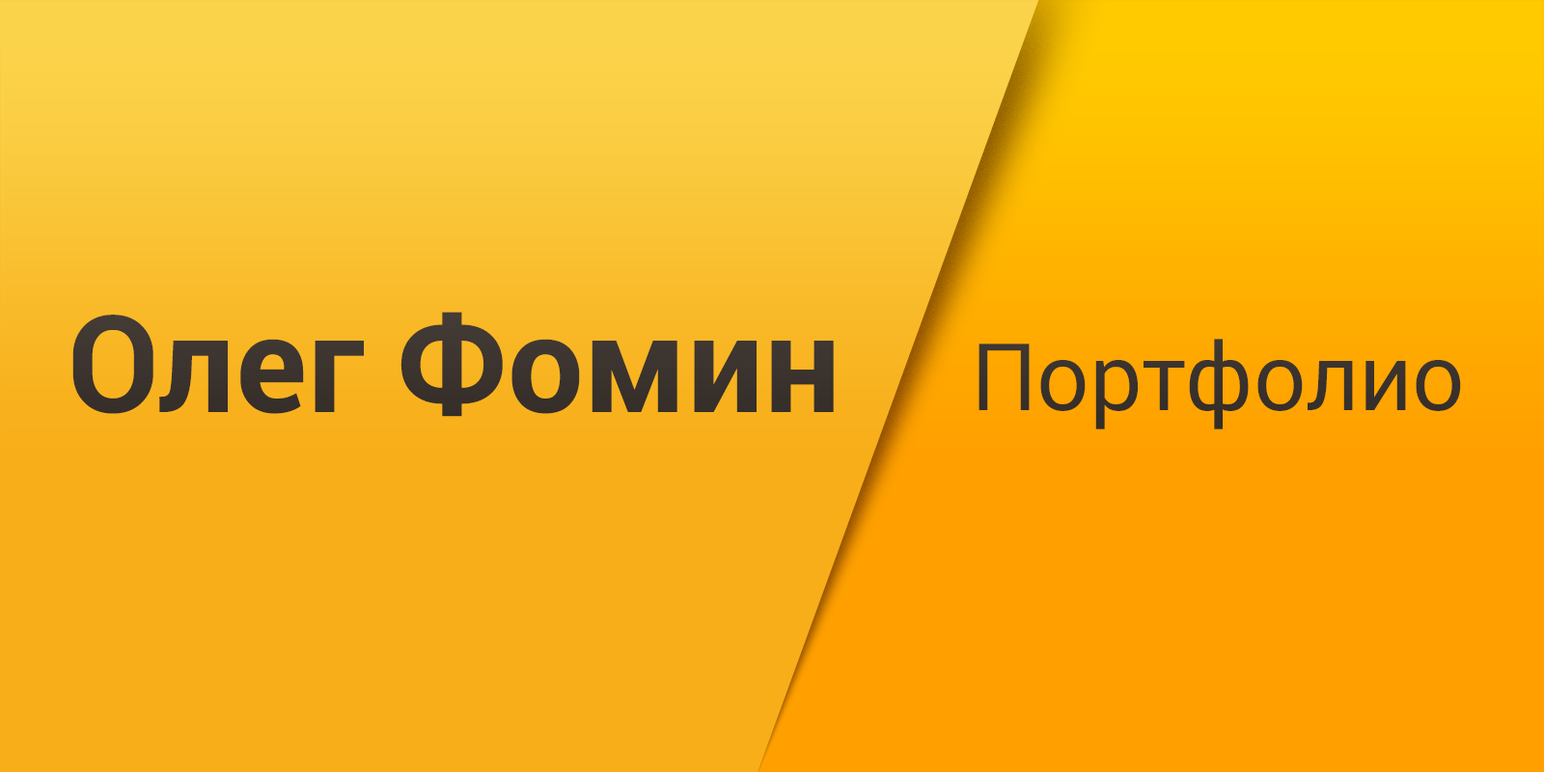
<style>
.page{position:relative;width:1544px;height:772px;background:#f8ae19}
.page>*{position:absolute;margin:0}
.t1{font:135px "Roboto-Bold";letter-spacing:-0.005em;color:#312924}
.t2{font:93.3px "Roboto-Regular";letter-spacing:-0.01em;color:#312924}
</style>
<div class="page">
<p class="t1" style="left:72px;top:312px;width:762px;height:105px">Олег Фомин</p>
<p class="t2" style="left:979px;top:339px;width:482px;height:91px">Портфолио</p>
</div>
